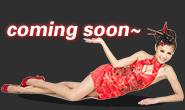
<style>
.page{position:relative;width:185px;height:110px;background:#2f2f2f}
.page>*{position:absolute;margin:0}
.t1{font:20px "FZZYJW--GB1-0";color:#fbffff;font-style:italic}
</style>
<div class="page">
<p class="t1" style="left:7px;top:21px;width:134px;height:19px">coming soon~</p>
</div>
